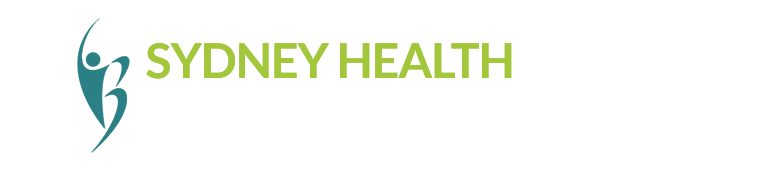
<style>
.page{position:relative;width:771px;height:180px;background:#ffffff}
.page>*{position:absolute;margin:0}
.t1{font:48px "Lato-Bold";letter-spacing:-0.02em;color:#a2c73a}
</style>
<div class="page">
<p class="t1" style="left:146px;top:43px;width:366px;height:36px">SYDNEY HEALTH</p>
</div>
